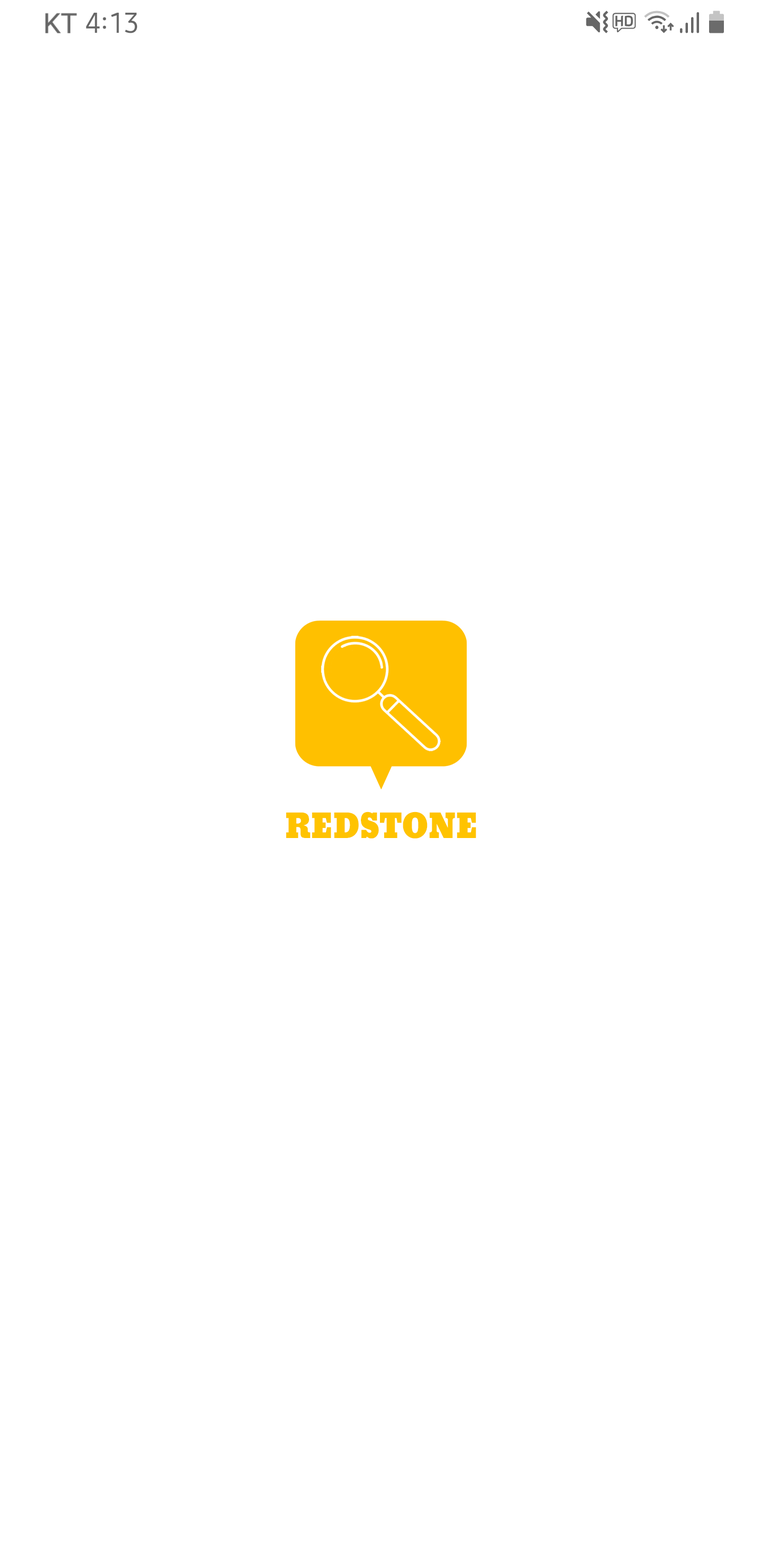
<style>
.page{position:relative;width:762px;height:1566px;background:#ffffff}
.page>*{position:absolute;margin:0}
.t1{font:32.3px "Bevan";color:#ffc300;scale:0.94 1}
</style>
<div class="page">
<p class="t1" style="left:286px;top:811px;width:190px;height:27px">REDSTONE</p>
</div>
